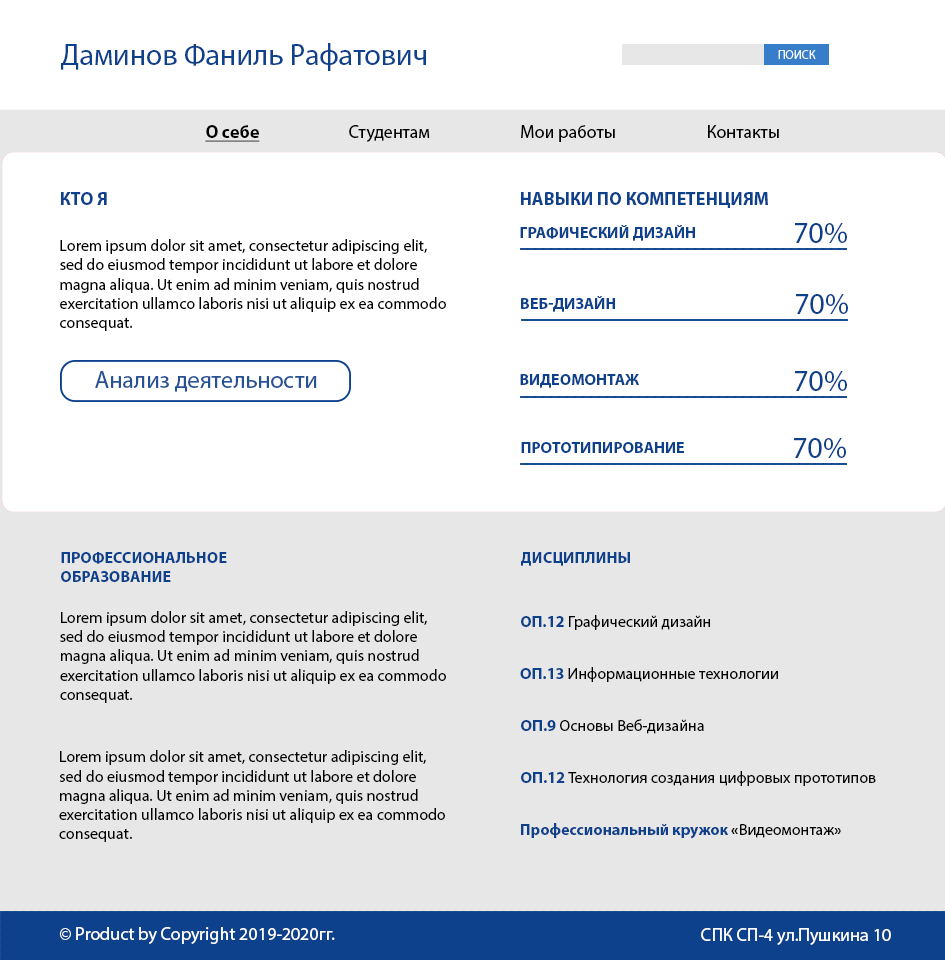
<style>
.page{position:relative;width:945px;height:960px;background:#ffffff}
.page>*{position:absolute;margin:0}
.t1{font:30px "MyriadPro-Regular";color:#0d418c}
.t2{font:18px "MyriadPro-Bold";color:#010101;text-decoration:underline}
.t3{font:18px "MyriadPro-Regular";color:#010101}
.t4{font:18px "MyriadPro-Regular";color:#000000}
.t5{font:18px "MyriadPro-Bold";color:#0d418c;text-transform:uppercase}
.t6{font:16px "MyriadPro-Bold";color:#0d418c;text-transform:uppercase}
.t7{font:16px "MyriadPro-Regular";color:#010101}
.t8{font:24px "MyriadPro-Regular";color:#255195}
.t9{font:16px "MyriadPro-Regular";color:#000000}
.t10{font:16px "MyriadPro-Bold";color:#0d418c}
.t11{font:16px "MyriadPro-Bold";color:#000000}
.t12{font:18px "MyriadPro-Regular";color:#ffffff}
</style>
<div class="page">
<p class="t1" style="left:61px;top:43px;width:365px;height:28px">Даминов Фаниль Рафатович</p>
<p class="t2" style="left:205px;top:125px;width:55px;height:17px">О себе</p>
<p class="t3" style="left:349px;top:125px;width:81px;height:17px">Студентам</p>
<p class="t3" style="left:521px;top:125px;width:94px;height:17px">Мои работы</p>
<p class="t4" style="left:708px;top:125px;width:71px;height:13px">Контакты</p>
<p class="t5" style="left:61px;top:192px;width:46px;height:13px">Кто я</p>
<p class="t5" style="left:521px;top:192px;width:247px;height:16px">Навыки по компетенцияМ</p>
<p class="t6" style="left:520px;top:225px;width:175px;height:16px">Графический дизайн</p>
<p class="t1" style="left:795px;top:223px;width:52px;height:20px">70%</p>
<p class="t7" style="left:60px;top:239px;width:386px;height:92px">Lorem ipsum dolor sit amet, consectetur adipiscing elit, <br>sed do eiusmod tempor incididunt ut labore et dolore <br>magna aliqua. Ut enim ad minim veniam, quis nostrud <br>exercitation ullamco laboris nisi ut aliquip ex ea commodo <br>consequat.</p>
<p class="t1" style="left:796px;top:294px;width:52px;height:20px">70%</p>
<p class="t6" style="left:521px;top:296px;width:94px;height:16px">вЕБ-дИЗАЙН</p>
<p class="t8" style="left:95px;top:371px;width:222px;height:21px">Анализ деятельности</p>
<p class="t6" style="left:520px;top:374px;width:119px;height:14px">Видеомонтаж</p>
<p class="t1" style="left:795px;top:371px;width:52px;height:20px">70%</p>
<p class="t1" style="left:794px;top:438px;width:52px;height:20px">70%</p>
<p class="t6" style="left:521px;top:442px;width:163px;height:11px">Прототипирование</p>
<p class="t6" style="left:61px;top:552px;width:166px;height:30px">Профессиональное <br>образование</p>
<p class="t6" style="left:521px;top:552px;width:109px;height:14px">Дисциплины</p>
<p class="t7" style="left:60px;top:611px;width:386px;height:92px">Lorem ipsum dolor sit amet, consectetur adipiscing elit, <br>sed do eiusmod tempor incididunt ut labore et dolore <br>magna aliqua. Ut enim ad minim veniam, quis nostrud <br>exercitation ullamco laboris nisi ut aliquip ex ea commodo <br>consequat.</p>
<p class="t9" style="left:521px;top:615px;width:189px;height:15px"><span class="t6">Оп.12 </span>Графический дизайн</p>
<p class="t9" style="left:520px;top:667px;width:258px;height:15px"><span class="t6">Оп.13 </span>Информационные технологии</p>
<p class="t9" style="left:521px;top:719px;width:183px;height:15px"><span class="t6">Оп.9 </span>Основы Веб-дизайна</p>
<p class="t7" style="left:59px;top:750px;width:386px;height:92px">Lorem ipsum dolor sit amet, consectetur adipiscing elit, <br>sed do eiusmod tempor incididunt ut labore et dolore <br>magna aliqua. Ut enim ad minim veniam, quis nostrud <br>exercitation ullamco laboris nisi ut aliquip ex ea commodo <br>consequat.</p>
<p class="t9" style="left:521px;top:771px;width:355px;height:15px"><span class="t6">Оп.12 </span>Технология создания цифровых прототипов</p>
<p class="t10" style="left:521px;top:823px;width:320px;height:16px">Профессиональный кружок <span class="t11">«</span><span class="t9">Видеомонтаж</span><span class="t11">»</span></p>
<p class="t12" style="left:59px;top:927px;width:276px;height:17px">© Product by Copyright 2019-2020гг.</p>
<p class="t12" style="left:701px;top:928px;width:190px;height:17px">СПК СП-4 ул.Пушкина 10</p>
</div>
